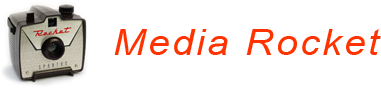
<style>
.page{position:relative;width:381px;height:88px;background:#ffffff}
.page>*{position:absolute;margin:0}
.t1{font:36px "Arial-ItalicMT";letter-spacing:0.06em;color:#ff3300;scale:1.09 1}
</style>
<div class="page">
<p class="t1" style="left:114px;top:29px;width:267px;height:26px">Media Rocket</p>
</div>
